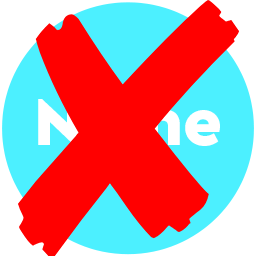
<style>
.page{position:relative;width:256px;height:256px;background:#ff0000}
.page>*{position:absolute;margin:0}
.t1{font:68.9px "CeraPro-Black"}
</style>
<div class="page">
<p class="t1" style="left:38px;top:99px;width:182px;height:47px">Name</p>
</div>
